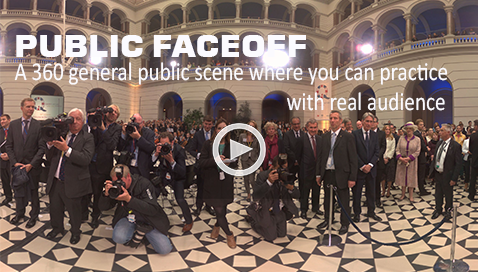
<style>
.page{position:relative;width:478px;height:272px}
.page>*{position:absolute;margin:0}
.t1{font:30px "Moire-ExtraBold";color:#fbfafe}
.t2{font:25.7px "Calibri";color:#fbfafe;scale:0.83 1}
</style>
<div class="page">
<p class="t1" style="left:16px;top:35px;width:290px;height:22px">PUBLIC FACEOFF</p>
<p class="t2" style="left:14px;top:62px;width:434px;height:49px;text-align:center">A 360 general public scene where you can practice <br>           with real audience</p>
</div>
